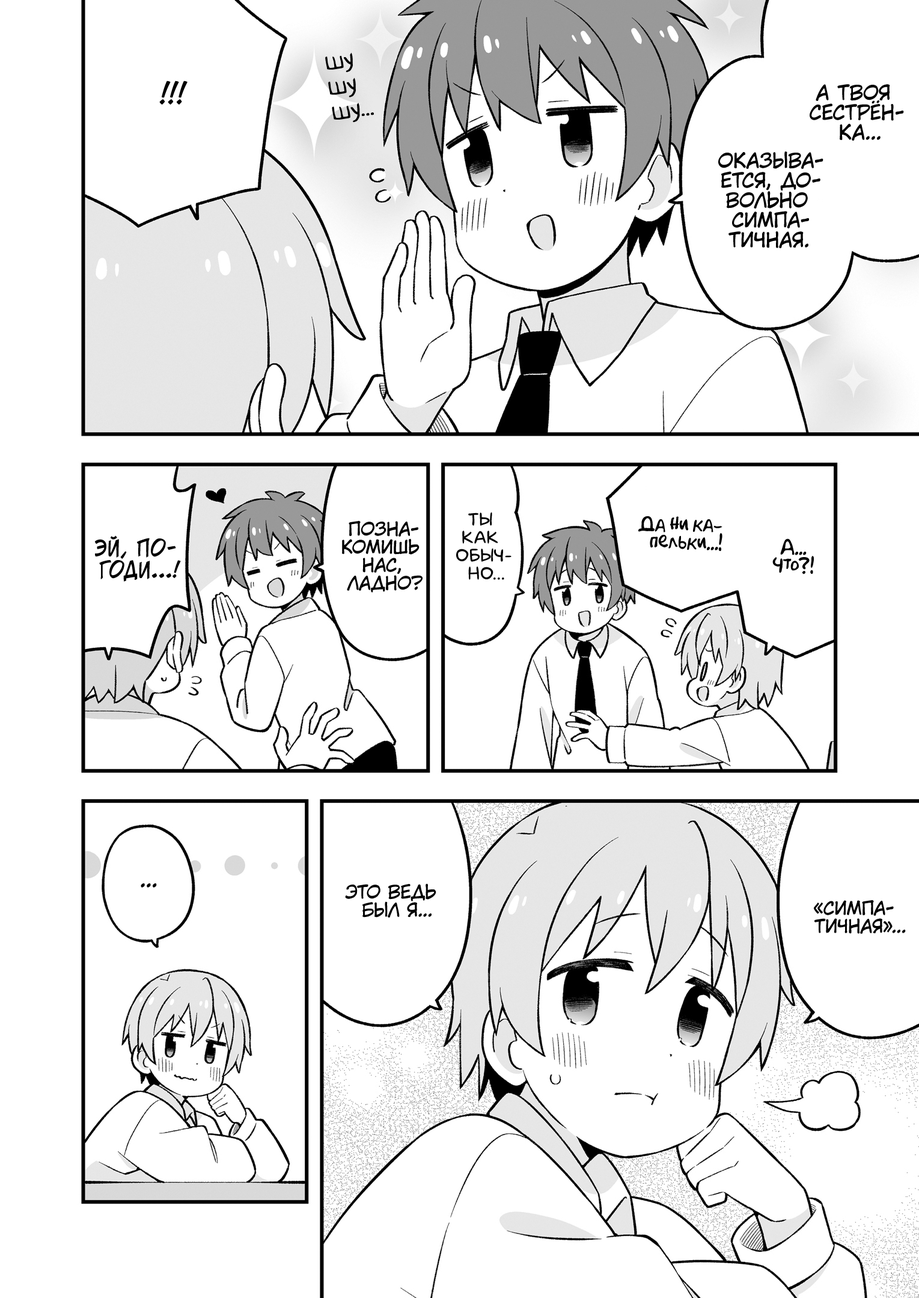
<style>
.page{position:relative;width:919px;height:1298px;background:#ffffff}
.page>*{position:absolute;margin:0}
.t1{font:25.2px "v_Augie";color:#000000}
.t2{font:28.8px "v_CCJeffCampbell";color:#000000;text-transform:uppercase}
.t3{font:19.8px "KuraiVoice2";color:#000000;text-transform:uppercase}
.t4{font:18px "KuraiVoice2";color:#000000;text-transform:uppercase}
.t5{font:18px "laCartoonerie";color:#000000;text-transform:uppercase}
.t6{font:18px "AkbarPlain";color:#000000}
.t7{font:21.6px "v_CCJeffCampbell";color:#000000;text-transform:uppercase}
.t8{font:21.6px "KuraiVoice2";color:#000000;text-transform:uppercase}
</style>
<div class="page">
<p class="t1" style="left:325px;top:52px;width:49px;height:71px;text-align:center;rotate:-7deg">шу<br>шу<br>шу...</p>
<p class="t2" style="left:159px;top:81px;width:28px;height:24px">!!!</p>
<p class="t3" style="left:809px;top:84px;width:95px;height:57px;text-align:center">А твоя<br>сестрён-<br>ка...</p>
<p class="t3" style="left:718px;top:151px;width:105px;height:97px;text-align:center">Оказыва-<br>ется, до-<br>вольно<br>симпа-<br>тичная.</p>
<p class="t4" style="left:342px;top:520px;width:80px;height:72px;text-align:center">Позна-<br>комишь<br>нас,<br>ладно?</p>
<p class="t5" style="left:456px;top:512px;width:55px;height:68px;text-align:center">Ты<br>как<br>обыч-<br>но...</p>
<p class="t6" style="left:638px;top:516px;width:84px;height:35px;text-align:center">Да ни ка-<br>пельки...!</p>
<p class="t7" style="left:94px;top:535px;width:87px;height:47px;text-align:center">Эй, по-<br>годи...!</p>
<p class="t6" style="left:772px;top:538px;width:42px;height:36px;text-align:center">А...<br>Что?!</p>
<p class="t8" style="left:141px;top:883px;width:16px;height:4px">...</p>
<p class="t4" style="left:345px;top:883px;width:91px;height:35px;text-align:center">Это ведь<br>был я...</p>
<p class="t4" style="left:814px;top:900px;width:92px;height:34px;text-align:center">«Симпа-<br>тичная»...</p>
</div>
